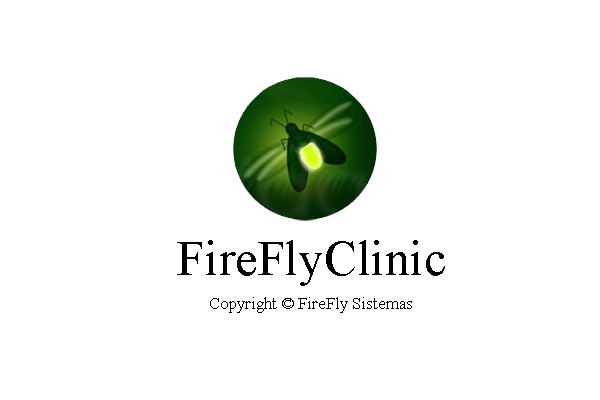
<style>
.page{position:relative;width:600px;height:400px;background:#ffffff}
.page>*{position:absolute;margin:0}
.t1{font:50px "TimesNewRomanPSMT";color:#000000}
.t2{font:16.7px "TimesNewRomanPSMT";color:#000000}
</style>
<div class="page">
<p class="t1" style="left:177px;top:240px;width:268px;height:46px">FireFlyClinic</p>
<p class="t2" style="left:210px;top:297px;width:202px;height:16px">Copyright © FireFly Sistemas</p>
</div>
